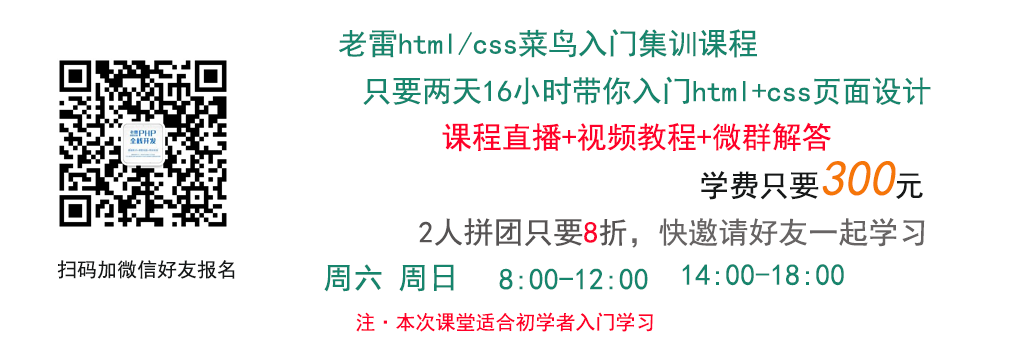
<style>
.page{position:relative;width:1024px;height:360px;background:#ffffff}
.page>*{position:absolute;margin:0}
.t1{font:30px "SimHei";color:#16856d}
.t2{font:30px "SimHei";color:#ff002a}
.t3{font:30px "SimHei";color:#161818}
.t4{font:50px "SimHei";color:#f57608;font-style:italic}
.t5{font:30px "SimHei";color:#676464}
.t6{font:30px "SimHei";color:#565353}
.t7{font:30px "SimHei";color:#fd042d}
.t8{font:20px "SimHei";color:#161818}
.t9{font:20px "SimHei";color:#ff002a}
</style>
<div class="page">
<p class="t1" style="left:339px;top:29px;width:418px;height:29px">老雷html/css菜鸟入门集训课程</p>
<p class="t1" style="left:363px;top:76px;width:568px;height:29px">只要两天16小时带你入门html+css页面设计</p>
<p class="t2" style="left:442px;top:122px;width:389px;height:30px">课程直播+视频教程+微群解答</p>
<p class="t3" style="left:701px;top:161px;width:222px;height:39px">学费只要<span class="t4">300</span>元</p>
<p class="t5" style="left:419px;top:218px;width:506px;height:30px"><span class="t6">2人拼团只要</span><span class="t7">8</span><span class="t6">折</span>，快邀请好友一起学习</p>
<p class="t8" style="left:57px;top:260px;width:178px;height:19px">扫码加微信好友报名</p>
<p class="t1" style="left:324px;top:264px;width:130px;height:28px">周六 周日</p>
<p class="t1" style="left:499px;top:268px;width:149px;height:22px">8:00-12:00</p>
<p class="t1" style="left:682px;top:264px;width:162px;height:22px">14:00-18:00</p>
<p class="t9" style="left:356px;top:312px;width:297px;height:20px">注·本次课堂适合初学者入门学习</p>
</div>
